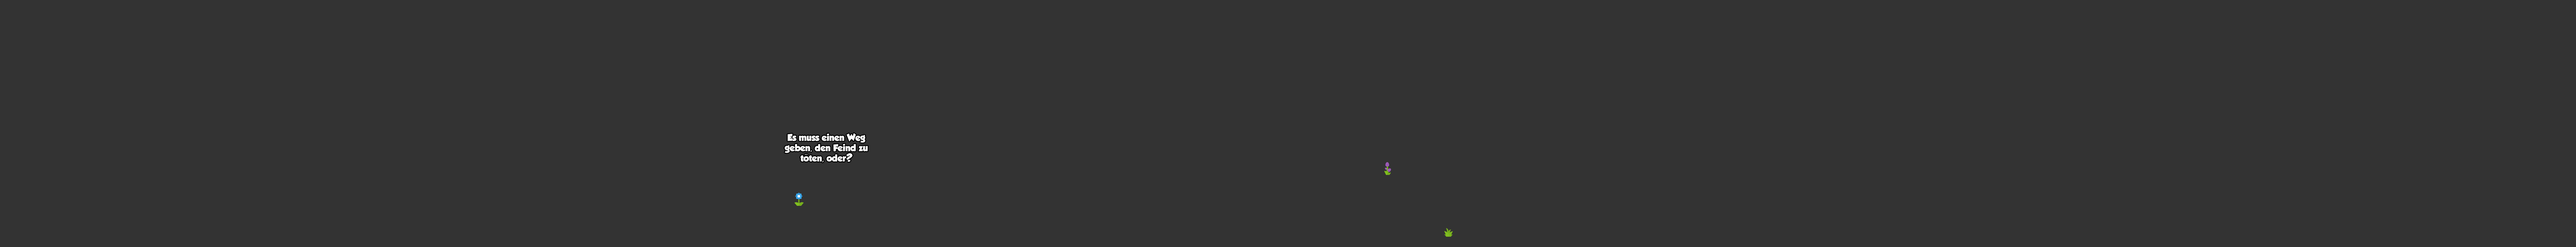
<style>
.page{position:relative;width:2576px;height:247px;background:#333333}
.page>*{position:absolute;margin:0}
.t1{font:8.6px "GROBOLD";color:#ffffff}
.t2{font:8.6px "MyriadPro-Regular";color:#ffffff}
</style>
<div class="page">
<p class="t1" style="left:785px;top:133px;width:83px;height:30px;text-align:center">Es muss einen Weg geben, den Feind zu toten, oder?</p>
<p class="t2" style="left:805px;top:154px;width:3px;height:1px">¨</p>
</div>
